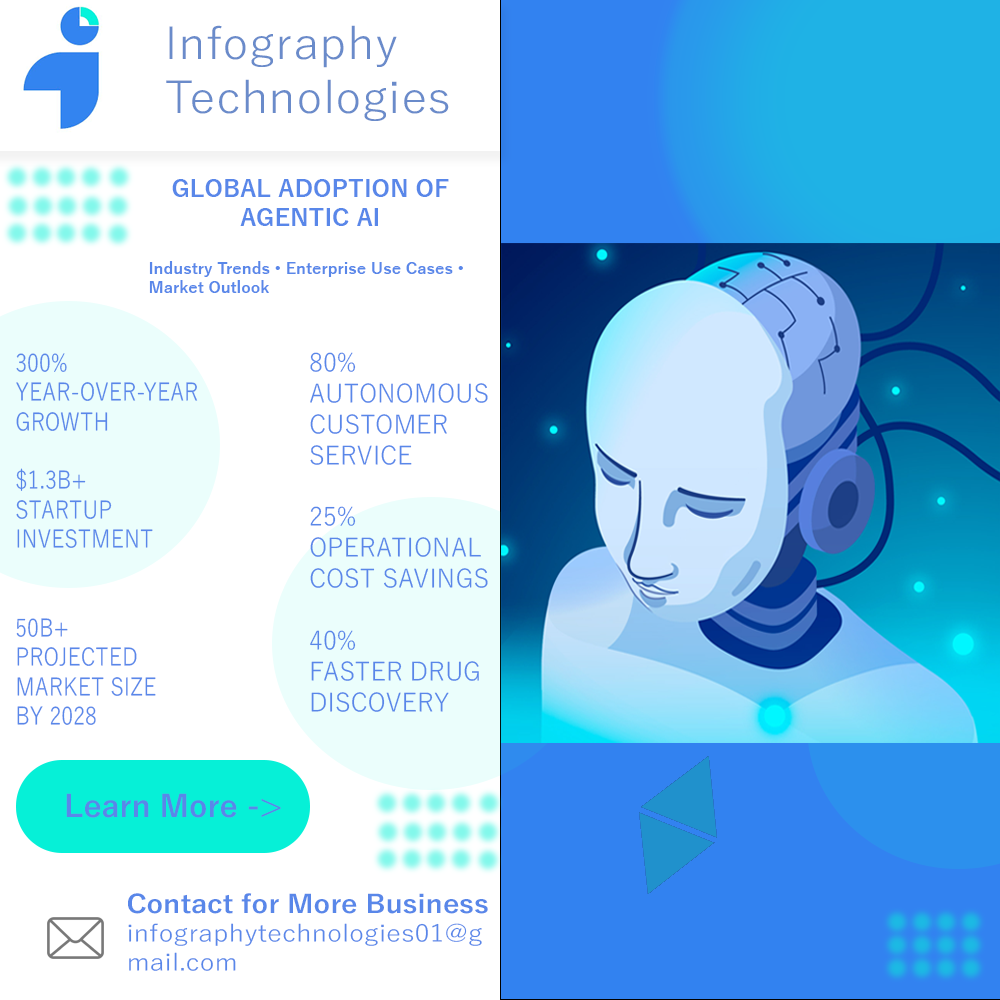
<style>
.page{position:relative;width:1000px;height:1000px;background:#ffffff}
.page>*{position:absolute;margin:0}
.t1{font:44.7px "YuGothic-Regular";color:#6a8bca;scale:1.07 1}
.t2{font:16px "YuGothic-Bold";color:#5987e9}
.t3{font:24px "YuGothic-Bold";color:#5987e9}
.t4{font:24.6px "YuGothic-Regular";color:#5987e9;scale:0.87 1}
.t5{font:25.7px "YuGothic-Regular";color:#5987e9;scale:0.97 1}
.t6{font:30px "YuGothic-Bold";color:#5987e9}
.t7{font:24px "YuGothic-Regular";color:#5987e9;scale:1.12 1}
.t8{font:24.9px "YuGothic-Bold";color:#5987e9;scale:1.12 1}
</style>
<div class="page">
<p class="t1" style="left:166px;top:25px;width:283px;height:96px">Infography<br>Technologies</p>
<p class="t2" style="left:149px;top:179px;width:314px;height:114px;text-align:center"><span class="t3">GLOBAL ADOPTION OF AGENTIC AI<br><br></span>Industry Trends • Enterprise Use Cases • Market Outlook</p>
<p class="t4" style="left:16px;top:353px;width:182px;height:372px">300%<br>YEAR-OVER-YEAR<br>GROWTH<br><br>$1.3B+<br>STARTUP<br>INVESTMENT<br><br><br>50B+<br>PROJECTED<br>MARKET SIZE<br>BY 2028</p>
<p class="t5" style="left:310px;top:352px;width:178px;height:360px">80%<br>AUTONOMOUS<br>CUSTOMER <br>SERVICE<br><br>25%<br>OPERATIONAL<br>COST SAVINGS<br><br>40%<br>FASTER DRUG<br>DISCOVERY</p>
<p class="t6" style="left:66px;top:793px;width:215px;height:25px">Learn More -&gt;</p>
<p class="t7" style="left:128px;top:893px;width:360px;height:78px"><span class="t8"><br>Contact for More Business<br></span>infographytechnologies01@gmail.com</p>
</div>
